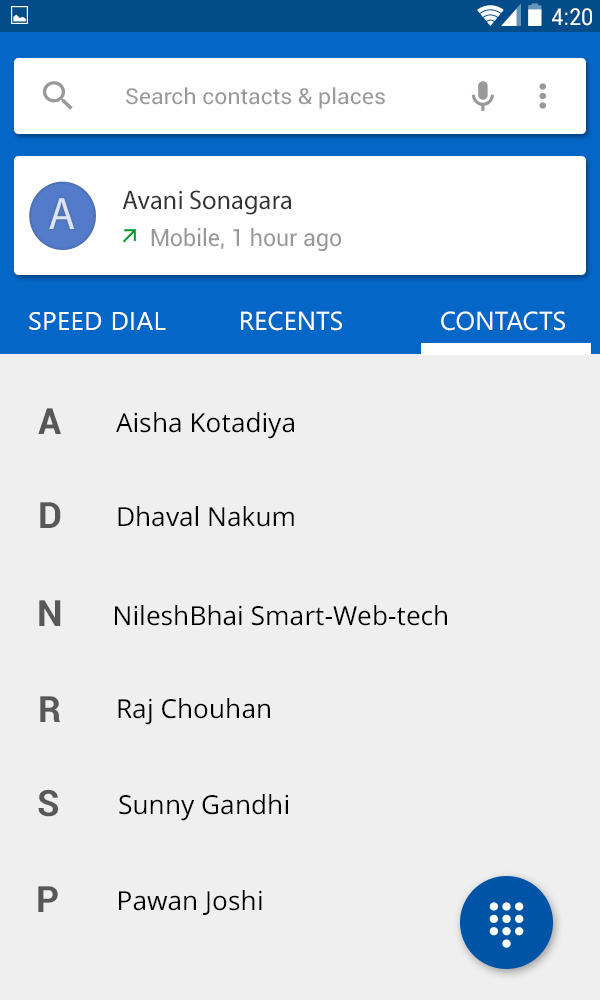
<style>
.page{position:relative;width:600px;height:1000px;background:#f0efef}
.page>*{position:absolute;margin:0}
.t1{font:23.1px "Roboto-Regular";color:#ffffff;scale:0.94 1}
.t2{font:22px "Roboto-Regular";color:#999999;scale:1.05 1}
.t3{font:45.6px "MyriadPro-Regular";color:#dce3f2}
.t4{font:27px "MyriadPro-Regular";color:#333333}
.t5{font:23.7px "Roboto-Regular";color:#999999}
.t6{font:26px "SegoeUISymbol";letter-spacing:0.015em;color:#ffffff}
.t7{font:26px "SegoeUISymbol";color:#ffffff}
.t8{font:36.3px "Roboto-Bold";color:#595757}
.t9{font:26.3px "OpenSans";color:#000000}
</style>
<div class="page">
<p class="t1" style="left:552px;top:8px;width:40px;height:18px">4:20</p>
<p class="t2" style="left:126px;top:87px;width:259px;height:22px">Search contacts &amp; places</p>
<p class="t3" style="left:49px;top:198px;width:26px;height:31px">A</p>
<p class="t4" style="left:122px;top:190px;width:170px;height:25px">Avani Sonagara</p>
<p class="t5" style="left:151px;top:228px;width:190px;height:23px">Mobile, 1 hour ago</p>
<p class="t6" style="left:29px;top:312px;width:137px;height:18px">SPEED DIAL</p>
<p class="t7" style="left:241px;top:311px;width:101px;height:20px">RECENTS</p>
<p class="t7" style="left:441px;top:311px;width:124px;height:20px">CONTACTS</p>
<p class="t8" style="left:38px;top:408px;width:23px;height:26px">A</p>
<p class="t9" style="left:116px;top:412px;width:178px;height:27px">Aisha Kotadiya</p>
<p class="t8" style="left:40px;top:502px;width:21px;height:26px">D</p>
<p class="t9" style="left:118px;top:506px;width:176px;height:21px">Dhaval Nakum</p>
<p class="t8" style="left:39px;top:600px;width:22px;height:26px">N</p>
<p class="t9" style="left:115px;top:605px;width:332px;height:21px">NileshBhai Smart-Web-tech</p>
<p class="t8" style="left:40px;top:696px;width:21px;height:26px">R</p>
<p class="t9" style="left:118px;top:698px;width:152px;height:27px">Raj Chouhan</p>
<p class="t8" style="left:38px;top:789px;width:20px;height:28px">S</p>
<p class="t9" style="left:119px;top:794px;width:169px;height:27px">Sunny Gandhi</p>
<p class="t8" style="left:38px;top:886px;width:20px;height:26px">P</p>
<p class="t9" style="left:119px;top:890px;width:143px;height:25px">Pawan Joshi</p>
</div>
